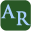
<style>
.page{position:relative;width:32px;height:32px;background:#285725}
.page>*{position:absolute;margin:0}
.t1{font:18px "TrajanPro-Bold";color:#a6cefb}
</style>
<div class="page">
<p class="t1" style="left:0px;top:4px;width:16px;height:15px">A</p>
<p class="t1" style="left:16px;top:11px;width:15px;height:15px">R</p>
</div>
